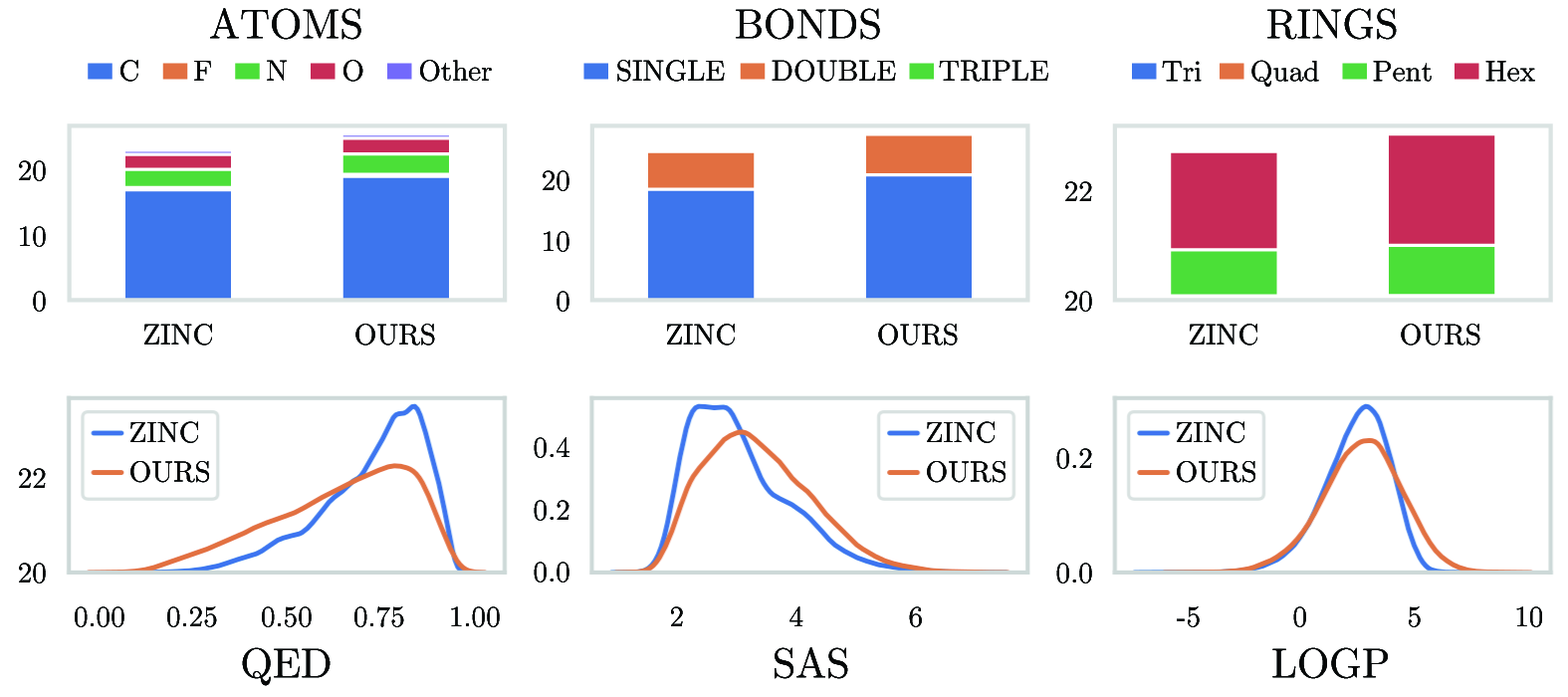
<style>
.page{position:relative;width:1568px;height:697px;background:#ffffff}
.page>*{position:absolute;margin:0}
.t1{font:41.5px "CMUSerif-Roman";color:#060808}
.t2{font:29px "CMUSerif-Roman";color:#060808}
.t3{font:29px/39.4px "CMUSerif-Roman";color:#060808}
</style>
<div class="page">
<p class="t1" style="left:210px;top:8px;width:151px;height:32px">ATOMS</p>
<p class="t1" style="left:210px;top:8px;width:151px;height:32px">ATOMS</p>
<p class="t1" style="left:736px;top:8px;width:144px;height:32px">BONDS</p>
<p class="t1" style="left:736px;top:8px;width:144px;height:32px">BONDS</p>
<p class="t1" style="left:1267px;top:8px;width:130px;height:32px">RINGS</p>
<p class="t1" style="left:1267px;top:8px;width:130px;height:32px">RINGS</p>
<p class="t2" style="left:120px;top:60px;width:18px;height:22px">C</p>
<p class="t2" style="left:120px;top:60px;width:18px;height:22px">C</p>
<p class="t2" style="left:194px;top:61px;width:17px;height:20px">F</p>
<p class="t2" style="left:194px;top:61px;width:17px;height:20px">F</p>
<p class="t2" style="left:267px;top:60px;width:20px;height:21px">N</p>
<p class="t2" style="left:267px;top:60px;width:20px;height:21px">N</p>
<p class="t2" style="left:343px;top:60px;width:20px;height:22px">O</p>
<p class="t2" style="left:343px;top:60px;width:20px;height:22px">O</p>
<p class="t2" style="left:420px;top:60px;width:72px;height:22px">Other</p>
<p class="t2" style="left:420px;top:60px;width:72px;height:22px">Other</p>
<p class="t2" style="left:617px;top:60px;width:108px;height:22px">SINGLE</p>
<p class="t2" style="left:617px;top:60px;width:108px;height:22px">SINGLE</p>
<p class="t2" style="left:772px;top:60px;width:124px;height:22px">DOUBLE</p>
<p class="t2" style="left:772px;top:60px;width:124px;height:22px">DOUBLE</p>
<p class="t2" style="left:939px;top:60px;width:109px;height:22px">TRIPLE</p>
<p class="t2" style="left:939px;top:60px;width:109px;height:22px">TRIPLE</p>
<p class="t2" style="left:1162px;top:61px;width:40px;height:21px">Tri</p>
<p class="t2" style="left:1162px;top:61px;width:40px;height:21px">Tri</p>
<p class="t2" style="left:1251px;top:60px;width:68px;height:27px">Quad</p>
<p class="t2" style="left:1251px;top:60px;width:68px;height:27px">Quad</p>
<p class="t2" style="left:1373px;top:61px;width:59px;height:21px">Pent</p>
<p class="t2" style="left:1373px;top:61px;width:59px;height:21px">Pent</p>
<p class="t2" style="left:1485px;top:61px;width:50px;height:21px">Hex</p>
<p class="t2" style="left:1485px;top:61px;width:50px;height:21px">Hex</p>
<p class="t2" style="left:19px;top:160px;width:27px;height:21px">20</p>
<p class="t2" style="left:19px;top:160px;width:27px;height:21px">20</p>
<p class="t2" style="left:543px;top:170px;width:26px;height:21px">20</p>
<p class="t2" style="left:543px;top:170px;width:26px;height:21px">20</p>
<p class="t2" style="left:1065px;top:181px;width:27px;height:20px">22</p>
<p class="t2" style="left:1065px;top:181px;width:27px;height:20px">22</p>
<p class="t2" style="left:20px;top:226px;width:26px;height:21px">10</p>
<p class="t2" style="left:20px;top:226px;width:26px;height:21px">10</p>
<p class="t2" style="left:544px;top:231px;width:25px;height:21px">10</p>
<p class="t2" style="left:544px;top:231px;width:25px;height:21px">10</p>
<p class="t2" style="left:33px;top:291px;width:13px;height:21px">0</p>
<p class="t2" style="left:33px;top:291px;width:13px;height:21px">0</p>
<p class="t2" style="left:557px;top:291px;width:12px;height:21px">0</p>
<p class="t2" style="left:557px;top:291px;width:12px;height:21px">0</p>
<p class="t2" style="left:1065px;top:291px;width:27px;height:21px">20</p>
<p class="t2" style="left:1065px;top:291px;width:27px;height:21px">20</p>
<p class="t2" style="left:144px;top:324px;width:68px;height:21px">ZINC</p>
<p class="t2" style="left:144px;top:324px;width:68px;height:21px">ZINC</p>
<p class="t2" style="left:355px;top:324px;width:80px;height:21px">OURS</p>
<p class="t2" style="left:355px;top:324px;width:80px;height:21px">OURS</p>
<p class="t2" style="left:667px;top:324px;width:68px;height:21px">ZINC</p>
<p class="t2" style="left:667px;top:324px;width:68px;height:21px">ZINC</p>
<p class="t2" style="left:878px;top:324px;width:80px;height:21px">OURS</p>
<p class="t2" style="left:878px;top:324px;width:80px;height:21px">OURS</p>
<p class="t2" style="left:1190px;top:324px;width:67px;height:21px">ZINC</p>
<p class="t2" style="left:1190px;top:324px;width:67px;height:21px">ZINC</p>
<p class="t2" style="left:1401px;top:324px;width:79px;height:21px">OURS</p>
<p class="t2" style="left:1401px;top:324px;width:79px;height:21px">OURS</p>
<p class="t3" style="left:130px;top:421px;width:79px;height:62px">ZINC<br>OURS</p>
<p class="t3" style="left:130px;top:421px;width:79px;height:62px">ZINC<br>OURS</p>
<p class="t3" style="left:927px;top:421px;width:79px;height:62px">ZINC<br>OURS</p>
<p class="t3" style="left:927px;top:421px;width:79px;height:62px">ZINC<br>OURS</p>
<p class="t3" style="left:1177px;top:421px;width:78px;height:62px">ZINC<br>OURS</p>
<p class="t3" style="left:1177px;top:421px;width:78px;height:62px">ZINC<br>OURS</p>
<p class="t2" style="left:534px;top:437px;width:35px;height:21px">0.4</p>
<p class="t2" style="left:534px;top:437px;width:35px;height:21px">0.4</p>
<p class="t2" style="left:1056px;top:448px;width:36px;height:21px">0.2</p>
<p class="t2" style="left:1056px;top:448px;width:36px;height:21px">0.2</p>
<p class="t2" style="left:19px;top:468px;width:27px;height:20px">22</p>
<p class="t2" style="left:19px;top:468px;width:27px;height:20px">22</p>
<p class="t2" style="left:534px;top:500px;width:35px;height:21px">0.2</p>
<p class="t2" style="left:534px;top:500px;width:35px;height:21px">0.2</p>
<p class="t2" style="left:19px;top:562px;width:27px;height:21px">20</p>
<p class="t2" style="left:19px;top:562px;width:27px;height:21px">20</p>
<p class="t2" style="left:534px;top:561px;width:35px;height:21px">0.0</p>
<p class="t2" style="left:534px;top:561px;width:35px;height:21px">0.0</p>
<p class="t2" style="left:1056px;top:562px;width:36px;height:21px">0.0</p>
<p class="t2" style="left:1056px;top:562px;width:36px;height:21px">0.0</p>
<p class="t2" style="left:75px;top:606px;width:49px;height:21px">0.00</p>
<p class="t2" style="left:75px;top:606px;width:49px;height:21px">0.00</p>
<p class="t2" style="left:167px;top:606px;width:50px;height:21px">0.25</p>
<p class="t2" style="left:167px;top:606px;width:50px;height:21px">0.25</p>
<p class="t2" style="left:262px;top:606px;width:50px;height:21px">0.50</p>
<p class="t2" style="left:262px;top:606px;width:50px;height:21px">0.50</p>
<p class="t2" style="left:354px;top:606px;width:50px;height:21px">0.75</p>
<p class="t2" style="left:354px;top:606px;width:50px;height:21px">0.75</p>
<p class="t2" style="left:451px;top:606px;width:49px;height:21px">1.00</p>
<p class="t2" style="left:451px;top:606px;width:49px;height:21px">1.00</p>
<p class="t2" style="left:671px;top:606px;width:12px;height:20px">2</p>
<p class="t2" style="left:671px;top:606px;width:12px;height:20px">2</p>
<p class="t2" style="left:789px;top:606px;width:14px;height:20px">4</p>
<p class="t2" style="left:789px;top:606px;width:14px;height:20px">4</p>
<p class="t2" style="left:909px;top:606px;width:13px;height:21px">6</p>
<p class="t2" style="left:909px;top:606px;width:13px;height:21px">6</p>
<p class="t2" style="left:1177px;top:606px;width:23px;height:21px">-5</p>
<p class="t2" style="left:1177px;top:606px;width:23px;height:21px">-5</p>
<p class="t2" style="left:1293px;top:606px;width:13px;height:21px">0</p>
<p class="t2" style="left:1293px;top:606px;width:13px;height:21px">0</p>
<p class="t2" style="left:1409px;top:606px;width:12px;height:21px">5</p>
<p class="t2" style="left:1409px;top:606px;width:12px;height:21px">5</p>
<p class="t2" style="left:1516px;top:606px;width:26px;height:21px">10</p>
<p class="t2" style="left:1516px;top:606px;width:26px;height:21px">10</p>
<p class="t1" style="left:242px;top:647px;width:89px;height:39px">QED</p>
<p class="t1" style="left:242px;top:647px;width:89px;height:39px">QED</p>
<p class="t1" style="left:775px;top:647px;width:73px;height:32px">SAS</p>
<p class="t1" style="left:775px;top:647px;width:73px;height:32px">SAS</p>
<p class="t1" style="left:1272px;top:647px;width:116px;height:32px">LOGP</p>
<p class="t1" style="left:1272px;top:647px;width:116px;height:32px">LOGP</p>
</div>
